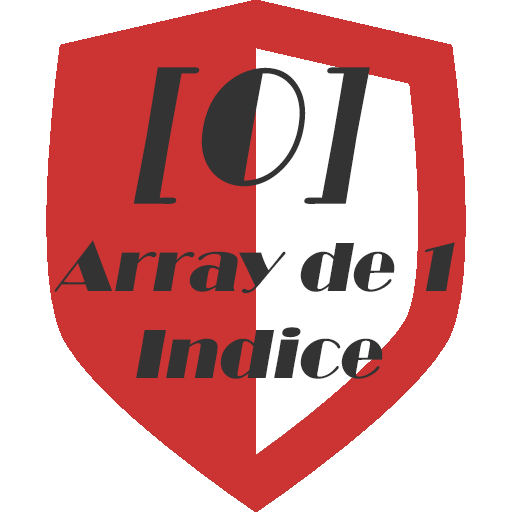
<style>
.page{position:relative;width:512px;height:525px;background:#ffffff}
.page>*{position:absolute;margin:0}
.t1{font:168.2px "Broadway";color:#333333;font-style:italic}
.t2{font:72.1px "Broadway";color:#333333;font-style:italic}
</style>
<div class="page">
<p class="t1" style="left:133px;top:67px;width:237px;height:137px">[0]</p>
<p class="t2" style="left:54px;top:240px;width:401px;height:139px;text-align:center">Array de 1 Indice</p>
</div>
